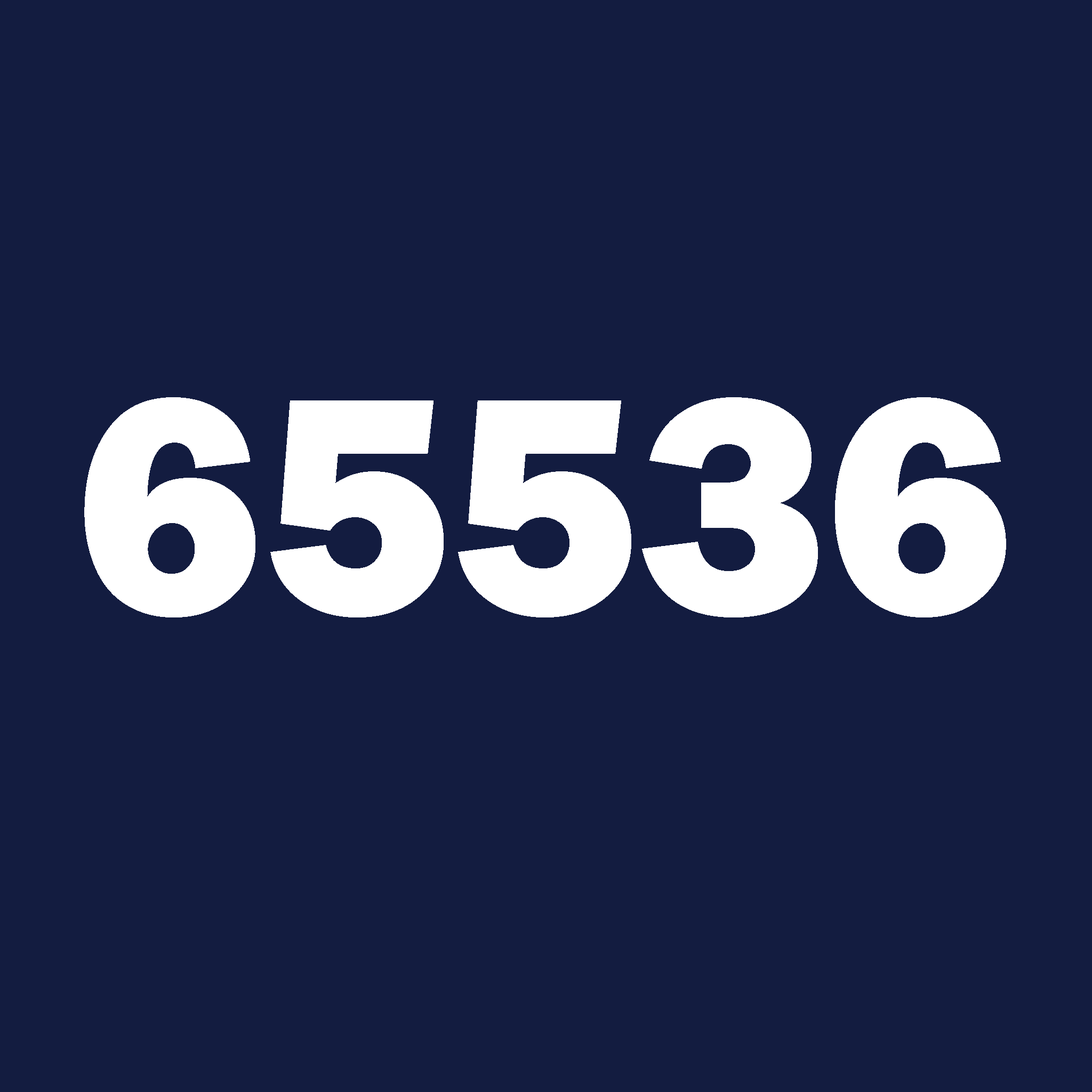
<style>
.page{position:relative;width:1092px;height:1092px;background:#131c40}
.page>*{position:absolute;margin:0}
.t1{font:319.9px "FranklinGothic-Heavy";color:#ffffff}
</style>
<div class="page">
<p class="t1" style="left:84px;top:397px;width:922px;height:220px">65536</p>
</div>
